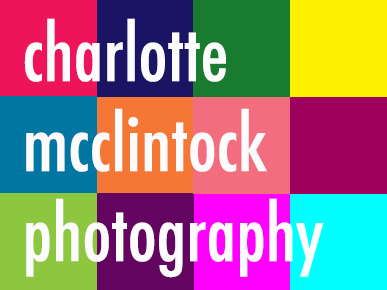
<style>
.page{position:relative;width:387px;height:290px}
.page>*{position:absolute;margin:0}
.t1{font:75px "Futura-CondensedMedium";color:#fdfcfc}
</style>
<div class="page">
<p class="t1" style="left:24px;top:18px;width:300px;height:260px">charlotte<br>mcclintock<br>photography</p>
</div>
